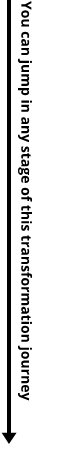
<style>
.page{position:relative;width:65px;height:450px;background:#ffffff}
.page>*{position:absolute;margin:0}
.t1{font:14px "OpenSans-Bold";color:#000000}
</style>
<div class="page">
<p class="t1" style="left:17px;top:1px;width:16px;height:400px;rotate:90deg">You can jump in any stage of this transformation journey</p>
</div>
